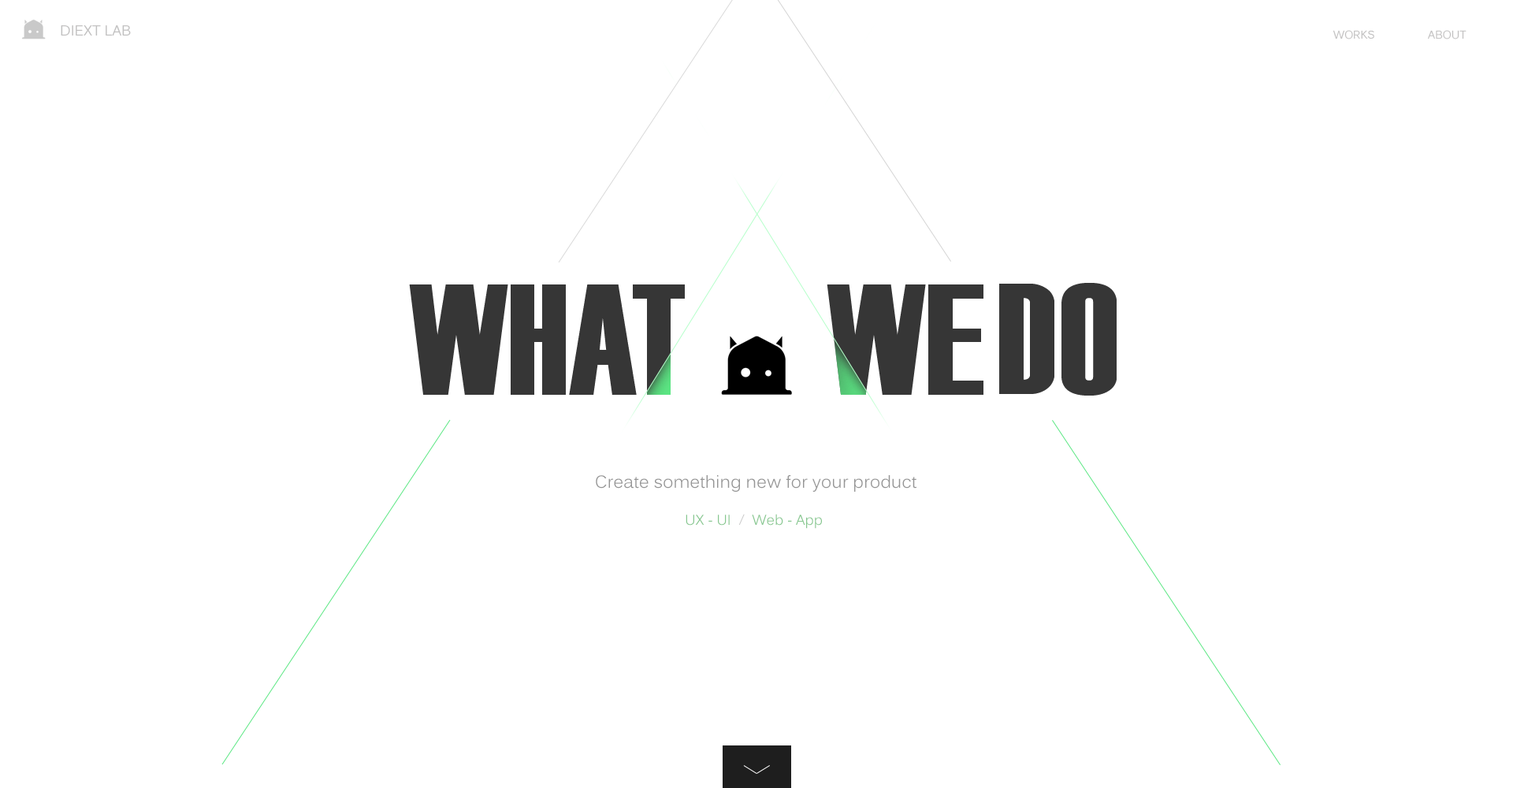
<style>
.page{position:relative;width:1513px;height:788px;background:#ffffff}
.page>*{position:absolute;margin:0}
.t1{font:14.2px "Kalinga";color:#c0bfbf;text-transform:uppercase}
.t2{font:11px "Kalinga";color:#c0bfbf;text-transform:uppercase}
.t3{font:17.3px "Kalinga";color:#959595}
.t4{font:14.2px "Kalinga";color:#86c78f}
.t5{font:14.2px "Kalinga";color:#c8c8c8}
</style>
<div class="page">
<p class="t1" style="left:61px;top:25px;width:70px;height:11px">Diext LAB</p>
<p class="t2" style="left:1333px;top:30px;width:41px;height:9px">works</p>
<p class="t2" style="left:1428px;top:30px;width:39px;height:9px">about</p>
<p class="t3" style="left:596px;top:475px;width:321px;height:17px">Create something new for your product</p>
<p class="t4" style="left:686px;top:514px;width:136px;height:15px">UX - UI  <span class="t5">/  </span>Web - App</p>
</div>
